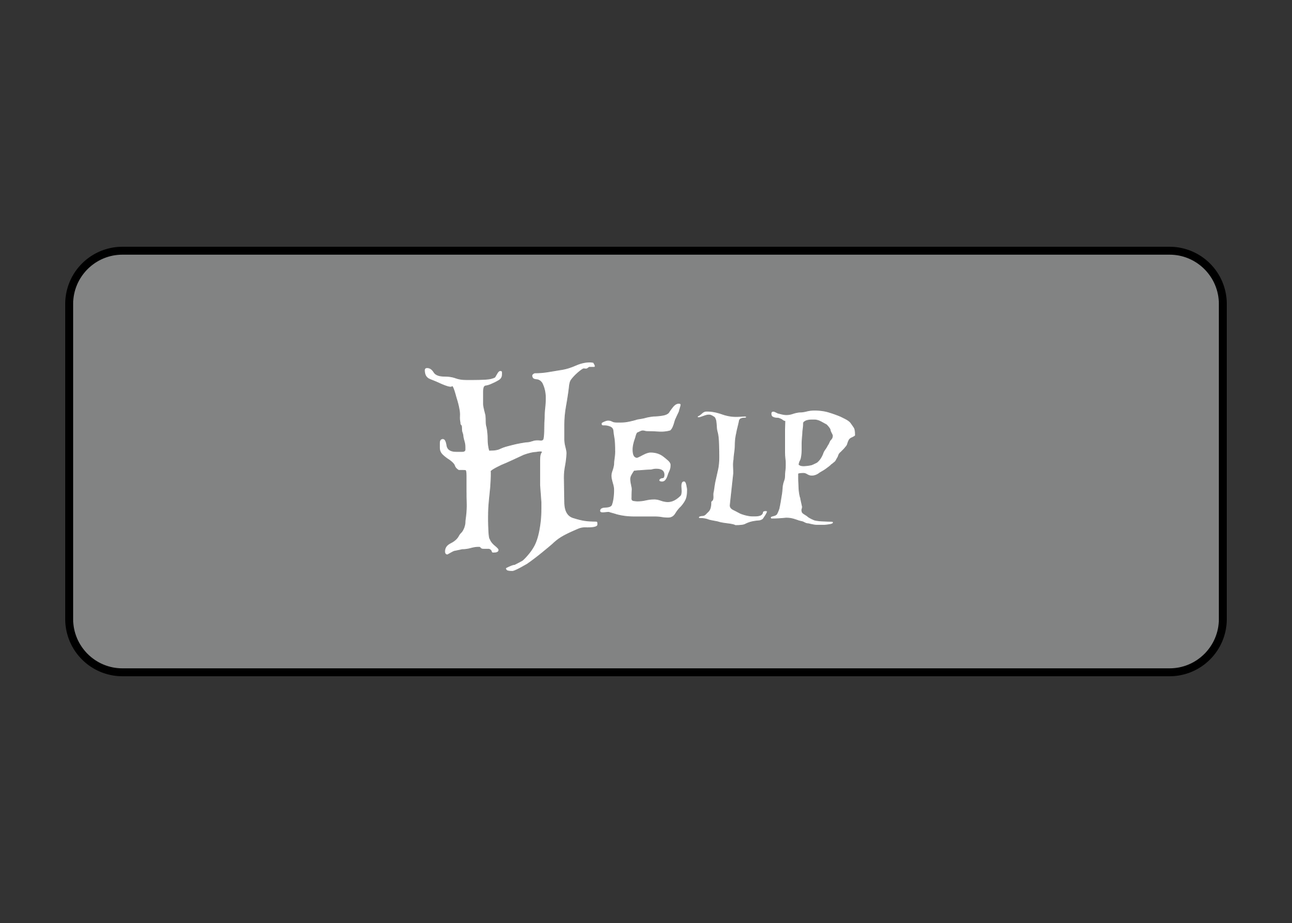
<style>
.page{position:relative;width:1292px;height:923px;background:#333333}
.page>*{position:absolute;margin:0}
.t1{font:282px "AliceinWonderland";color:#ffffff}
</style>
<div class="page">
<p class="t1" style="left:425px;top:362px;width:430px;height:209px">Help</p>
</div>
